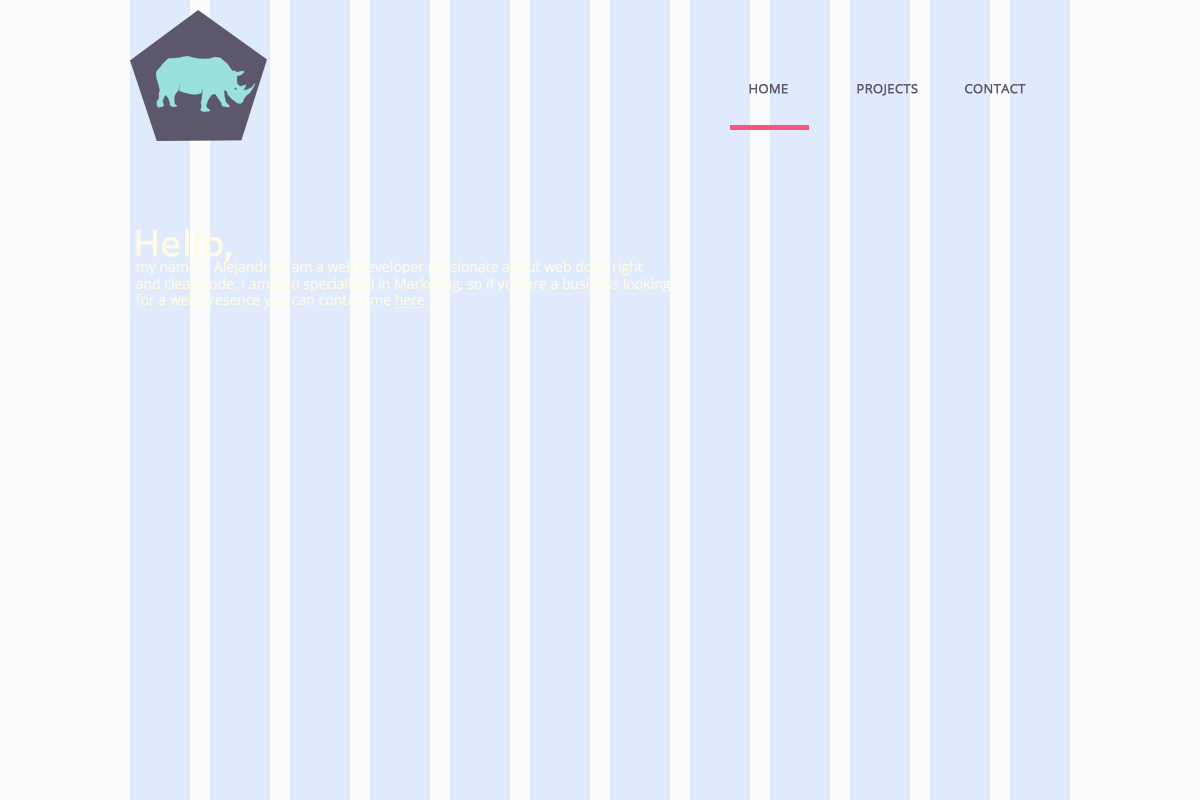
<style>
.page{position:relative;width:1200px;height:800px;background:#dfebfc}
.page>*{position:absolute;margin:0}
.t1{font:13px "OpenSans";color:#5d576b;font-weight:bold}
.t2{font:36px "OpenSans";color:#fffae3;font-weight:bold}
.t3{font:14px "OpenSans";color:#fffae3}
.t4{font:14px "OpenSans";color:#fffae3;text-decoration:underline}
</style>
<div class="page">
<p class="t1" style="left:749px;top:84px;width:277px;height:12px">HOME  PROJECTS  CONTACT</p>
<p class="t2" style="left:136px;top:229px;width:96px;height:33px">Hello,</p>
<p class="t3" style="left:135px;top:261px;width:536px;height:48px">my name is Alejandro, I am a web developer passionate about web done right<br>and clean code. I am also specialized in Marketing, so if you are a business looking<br>for a web presence you can contact me <span class="t4">here</span>.</p>
</div>
